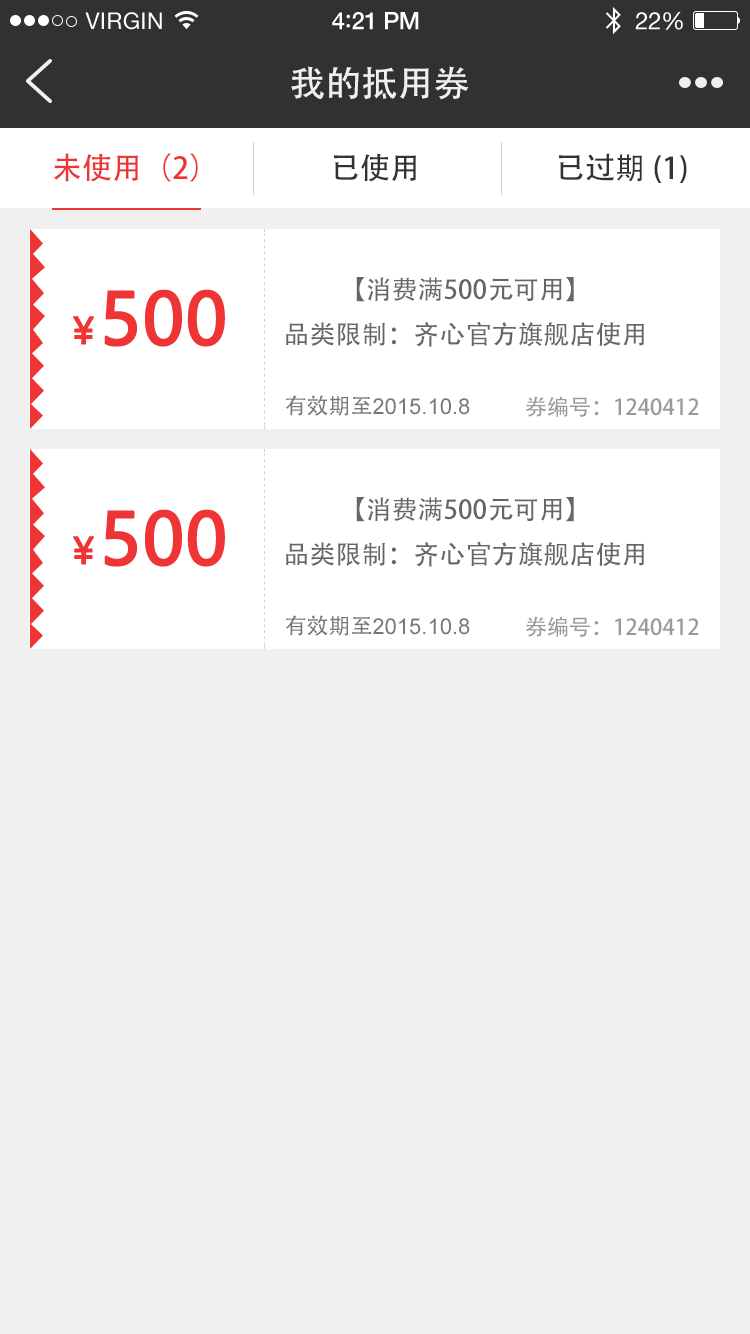
<style>
.page{position:relative;width:750px;height:1334px;background:#f0f0f0}
.page>*{position:absolute;margin:0}
.t1{font:36px "AdobeHeitiStd-Regular";color:#f0f0f0}
.t2{font:30px "AdobeHeitiStd-Regular";color:#ee3434}
.t3{font:30px "AdobeHeitiStd-Regular";color:#333333}
.t4{font:26px "AdobeHeitiStd-Regular";color:#666666}
.t5{font:70px "MicrosoftYaHei";color:#ee3434;font-weight:bold}
.t6{font:36px "MicrosoftYaHei";color:#ee3434;font-weight:bold}
.t7{font:22px "ArialMT";color:#797777}
.t8{font:22px "AdobeHeitiStd-Regular";color:#797777}
.t9{font:22px "AdobeHeitiStd-Regular";color:#999999}
</style>
<div class="page">
<p class="t1" style="left:291px;top:66px;width:178px;height:34px">我的抵用券</p>
<p class="t2" style="left:53px;top:153px;width:145px;height:29px">未使用（2）</p>
<p class="t3" style="left:334px;top:153px;width:82px;height:29px">已使用</p>
<p class="t3" style="left:559px;top:153px;width:128px;height:30px">已过期(1)</p>
<p class="t4" style="left:286px;top:277px;width:358px;height:70px;text-align:center">【消费满500元可用】<br>品类限制：齐心官方旗舰店使用</p>
<p class="t5" style="left:104px;top:289px;width:121px;height:58px">500</p>
<p class="t6" style="left:73px;top:316px;width:21px;height:29px">￥</p>
<p class="t7" style="left:285px;top:395px;width:185px;height:21px"><span class="t8">有效期至</span>2015.10.8</p>
<p class="t9" style="left:525px;top:396px;width:174px;height:21px">券编号：1240412</p>
<p class="t4" style="left:286px;top:497px;width:358px;height:70px;text-align:center">【消费满500元可用】<br>品类限制：齐心官方旗舰店使用</p>
<p class="t5" style="left:104px;top:509px;width:121px;height:58px">500</p>
<p class="t6" style="left:73px;top:536px;width:21px;height:29px">￥</p>
<p class="t7" style="left:285px;top:615px;width:185px;height:21px"><span class="t8">有效期至</span>2015.10.8</p>
<p class="t9" style="left:525px;top:616px;width:174px;height:21px">券编号：1240412</p>
</div>
